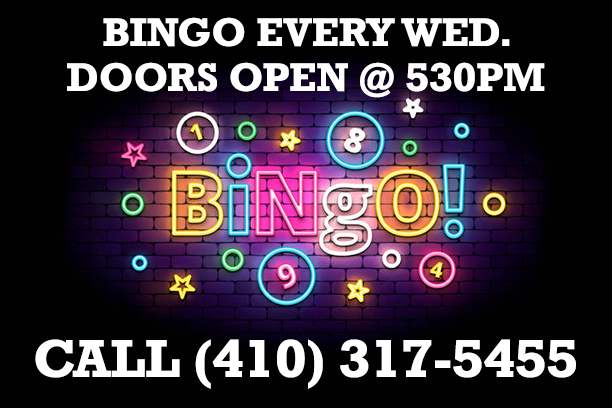
<style>
.page{position:relative;width:612px;height:408px;background:#010101}
.page>*{position:absolute;margin:0}
.t1{font:37.5px "Rockwell-Bold";color:#ffffff}
.t2{font:50px "Rockwell-Bold";color:#ffffff}
</style>
<div class="page">
<p class="t1" style="left:67px;top:17px;width:478px;height:81px;text-align:center">BINGO EVERY WED.<br>DOORS OPEN @ 530PM</p>
<p class="t2" style="left:35px;top:339px;width:541px;height:50px">CALL (410) 317-5455</p>
</div>
